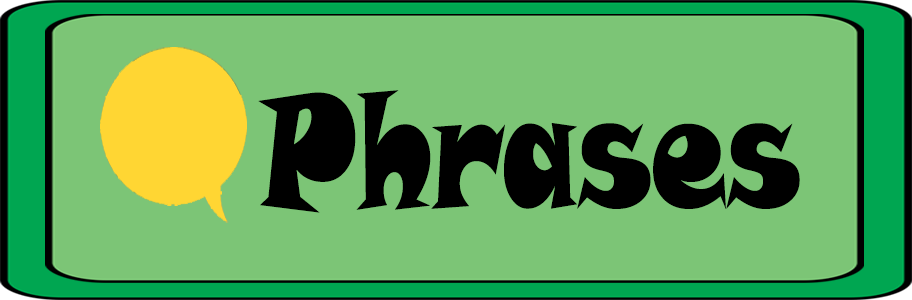
<style>
.page{position:relative;width:912px;height:300px;background:#7cc576}
.page>*{position:absolute;margin:0}
.t1{font:160px "SnapITC-Regular";color:#000000;scale:0.75 1}
</style>
<div class="page">
<p class="t1" style="left:258px;top:90px;width:542px;height:123px">Phrases</p>
</div>
